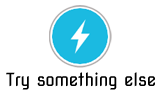
<style>
.page{position:relative;width:159px;height:93px;background:#ffffff}
.page>*{position:absolute;margin:0}
.t1{font:18px "NovaSquare";color:#000000;scale:0.93 1}
</style>
<div class="page">
<p class="t1" style="left:6px;top:72px;width:149px;height:18px">Try something else</p>
</div>
